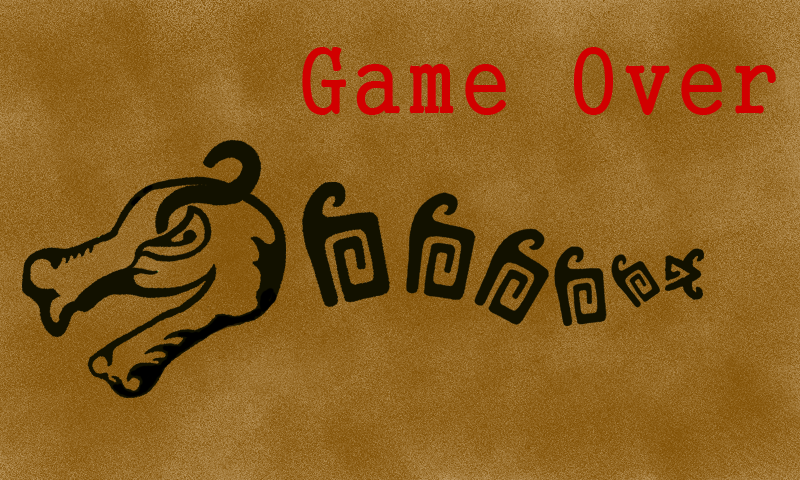
<style>
.page{position:relative;width:800px;height:480px}
.page>*{position:absolute;margin:0}
.t1{font:90px "GungsuhChe";letter-spacing:0.1em;color:#d10000}
</style>
<div class="page">
<p class="t1" style="left:302px;top:47px;width:474px;height:68px">Game Over</p>
</div>
